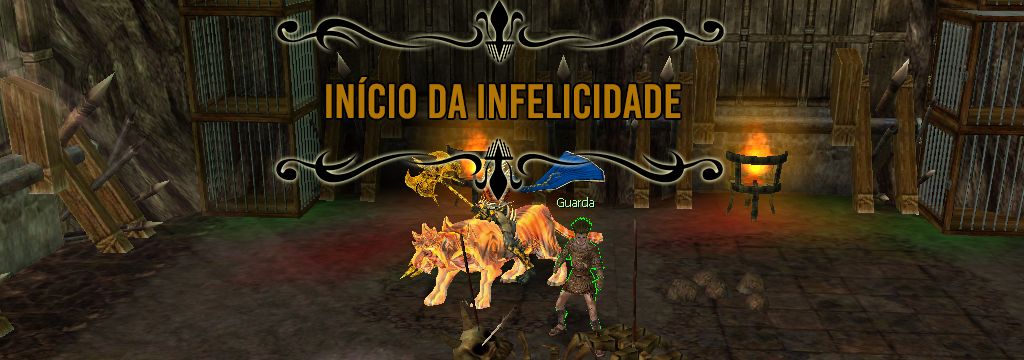
<style>
.page{position:relative;width:1024px;height:360px}
.page>*{position:absolute;margin:0}
.t1{font:48px "BebasKai";color:#b07504}
</style>
<div class="page">
<p class="t1" style="left:326px;top:77px;width:355px;height:42px">início da infelicidade</p>
</div>
